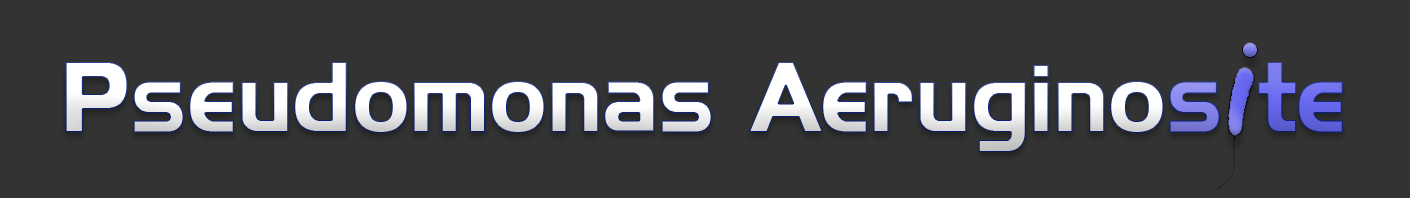
<style>
.page{position:relative;width:1410px;height:198px;background:#333333}
.page>*{position:absolute;margin:0}
.t1{font:90px "HighlandGothicFLF-Bold";color:#ffffff}
.t2{font:90px "HighlandGothicFLF-Bold";color:#8686f0}
.t3{font:90px "HighlandGothicFLF-Bold";color:#6868f0}
</style>
<div class="page">
<p class="t1" style="left:65px;top:62px;width:1278px;height:90px">Pseudomonas Aerugino<span class="t2">s </span><span class="t3">te</span></p>
</div>
